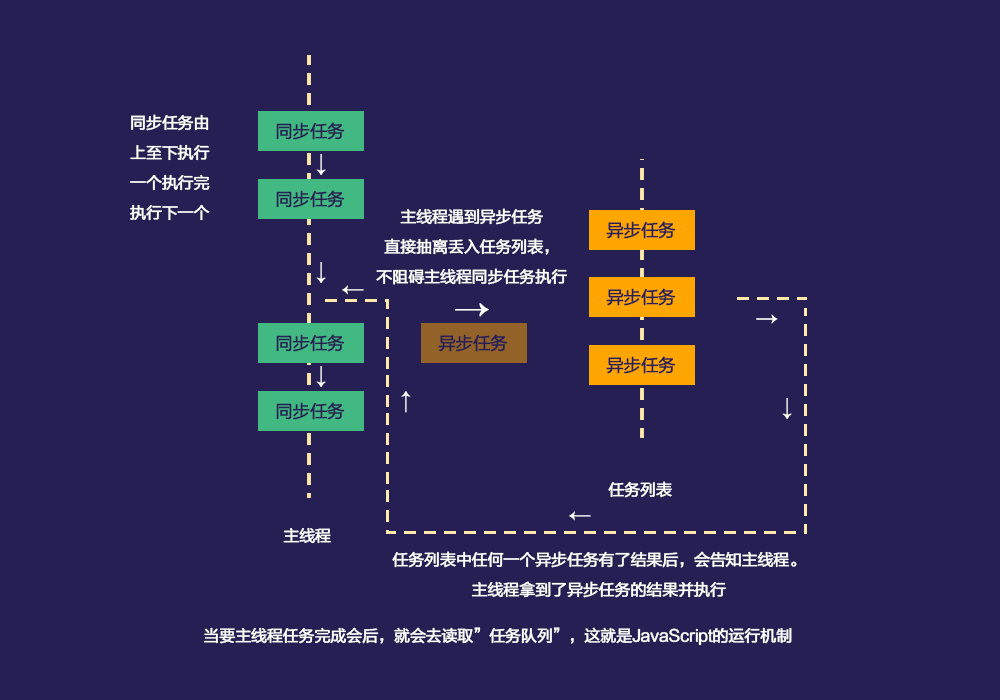
<style>
.page{position:relative;width:1000px;height:700px;background:#261f53}
.page>*{position:absolute;margin:0}
.t1{font:16px/30px "FZLTHJW--GB1-0";letter-spacing:-0.07em;color:#ffffff;font-weight:bold}
.t2{font:17.5px "FZLTHJW--GB1-0";letter-spacing:-0.07em;color:#261f53;font-weight:bold}
.t3{font:21px "FZLTHJW--GB1-0";letter-spacing:-0.07em;color:#ffffff;font-weight:bold}
.t4{font:33px "FZLTHJW--GB1-0";letter-spacing:-0.07em;color:#ffffff;font-weight:bold}
.t5{font:20.6px "FZLTHJW--GB1-0";letter-spacing:-0.07em;color:#ffffff;font-weight:bold;scale:1.03 1}
.t6{font:16px "FZLTHJW--GB1-0";letter-spacing:-0.07em;color:#ffffff;font-weight:bold}
</style>
<div class="page">
<p class="t1" style="left:130px;top:114px;width:80px;height:107px;text-align:center">同步任务由<br>上至下执行<br>一个执行完<br>执行下一个</p>
<p class="t2" style="left:276px;top:122px;width:69px;height:18px">同步任务</p>
<p class="t3" style="left:316px;top:154px;width:10px;height:21px">↓</p>
<p class="t2" style="left:276px;top:190px;width:69px;height:18px">同步任务</p>
<p class="t1" style="left:376px;top:208px;width:191px;height:77px;text-align:center">主线程遇到异步任务<br>直接抽离丢入任务列表，<br>不阻碍主线程同步任务执行</p>
<p class="t2" style="left:606px;top:221px;width:70px;height:18px">异步任务</p>
<p class="t3" style="left:316px;top:262px;width:10px;height:21px">↓</p>
<p class="t3" style="left:342px;top:285px;width:22px;height:10px;rotate:90deg">↓</p>
<p class="t2" style="left:606px;top:288px;width:70px;height:18px">异步任务</p>
<p class="t4" style="left:455px;top:303px;width:34px;height:14px">→</p>
<p class="t5" style="left:756px;top:314px;width:22px;height:10px;rotate:90deg">↓</p>
<p class="t2" style="left:276px;top:334px;width:69px;height:18px">同步任务</p>
<p class="t2" style="left:438px;top:334px;width:70px;height:18px">异步任务</p>
<p class="t3" style="left:316px;top:366px;width:10px;height:21px">↓</p>
<p class="t2" style="left:606px;top:356px;width:70px;height:18px">异步任务</p>
<p class="t3" style="left:401px;top:391px;width:10px;height:22px;rotate:180deg">↓</p>
<p class="t3" style="left:782px;top:398px;width:10px;height:21px">↓</p>
<p class="t2" style="left:276px;top:402px;width:69px;height:18px">同步任务</p>
<p class="t6" style="left:608px;top:481px;width:64px;height:17px">任务列表</p>
<p class="t3" style="left:569px;top:511px;width:22px;height:10px;rotate:90deg">↓</p>
<p class="t6" style="left:283px;top:527px;width:48px;height:17px">主线程</p>
<p class="t1" style="left:392px;top:551px;width:405px;height:47px;text-align:center">任务列表中任何一个异步任务有了结果后，会告知主线程。<br>主线程拿到了异步任务的结果并执行</p>
<p class="t6" style="left:203px;top:627px;width:589px;height:18px">当要主线程任务完成会后，就会去读取”任务队列”，这就是JavaScript的运行机制</p>
</div>
